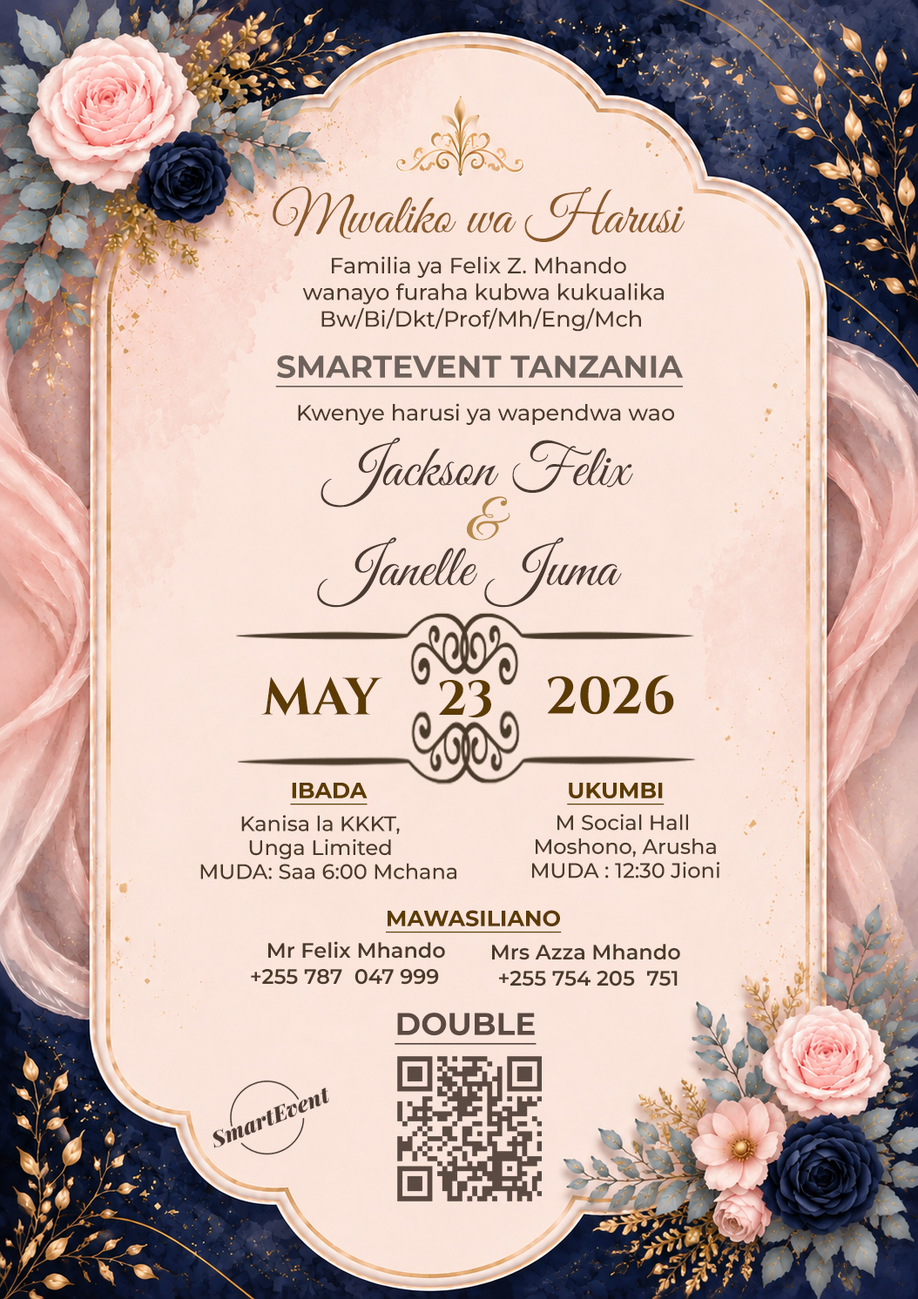
<style>
.page{position:relative;width:918px;height:1299px}
.page>*{position:absolute;margin:0}
.t1{font:56.7px "GreatVibes-Regular";letter-spacing:-0.01em;color:#8b5a2b}
.t2{font:22.2px "Montserrat-Medium";color:#4a3a2a}
.t3{font:31.3px "Montserrat-Bold";color:#6e625c;text-decoration:underline}
.t4{font:59.1px "GreatVibes-Regular";color:#4a3a32}
.t5{font:58.5px "GreatVibes-Regular";color:#b68a4c}
.t6{font:52.2px "CinzelRoman-Bold";color:#5c3b03}
.t7{font:48.9px "CinzelRoman-Bold";color:#5c3b03}
.t8{font:22.2px "Montserrat-Bold";color:#5c3b03;text-decoration:underline}
.t9{font:20.9px/23.9px "Montserrat-Medium";color:#4a3a2a}
.t10{font:20.9px/26.1px "Montserrat-SemiBold";color:#4a3a2a}
.t11{font:31.3px "Montserrat-Bold";color:#5a4a42;text-decoration:underline}
</style>
<div class="page">
<p class="t1" style="left:273px;top:186px;width:411px;height:56px">Mwaliko wa Harusi</p>
<p class="t2" style="left:302px;top:256px;width:362px;height:76px;text-align:center">Familia ya Felix Z. Mhando <br> wanayo furaha kubwa kukualika<br>Bw/Bi/Dkt/Prof/Mh/Eng/Mch</p>
<p class="t3" style="left:275px;top:355px;width:409px;height:33px">SMARTEVENT TANZANIA</p>
<p class="t2" style="left:298px;top:403px;width:376px;height:22px">Kwenye harusi ya wapendwa wao</p>
<p class="t4" style="left:320px;top:437px;width:313px;height:71px">Jackson Felix</p>
<p class="t5" style="left:467px;top:496px;width:43px;height:45px">&amp;</p>
<p class="t4" style="left:317px;top:537px;width:305px;height:71px">Janelle Juma</p>
<p class="t6" style="left:261px;top:677px;width:121px;height:39px">MAY</p>
<p class="t6" style="left:547px;top:675px;width:127px;height:40px">2026</p>
<p class="t7" style="left:439px;top:680px;width:52px;height:38px">23</p>
<p class="t8" style="left:290px;top:783px;width:77px;height:22px">IBADA</p>
<p class="t8" style="left:567px;top:783px;width:97px;height:22px">UKUMBI</p>
<p class="t9" style="left:200px;top:815px;width:256px;height:64px;text-align:center">Kanisa la KKKT,<br>Unga Limited<br>   MUDA: Saa 6:00 Mchana</p>
<p class="t9" style="left:532px;top:814px;width:187px;height:65px;text-align:center">M Social Hall <br>Moshono, Arusha<br>MUDA : 12:30 Jioni</p>
<p class="t8" style="left:386px;top:910px;width:176px;height:23px">MAWASILIANO</p>
<p class="t10" style="left:251px;top:941px;width:194px;height:44px;text-align:center">Mr Felix Mhando<br> +255 787  047 999</p>
<p class="t10" style="left:492px;top:944px;width:188px;height:43px;text-align:center">Mrs Azza Mhando<br> +255 754 205  751</p>
<p class="t11" style="left:394px;top:1013px;width:142px;height:32px">DOUBLE</p>
</div>
